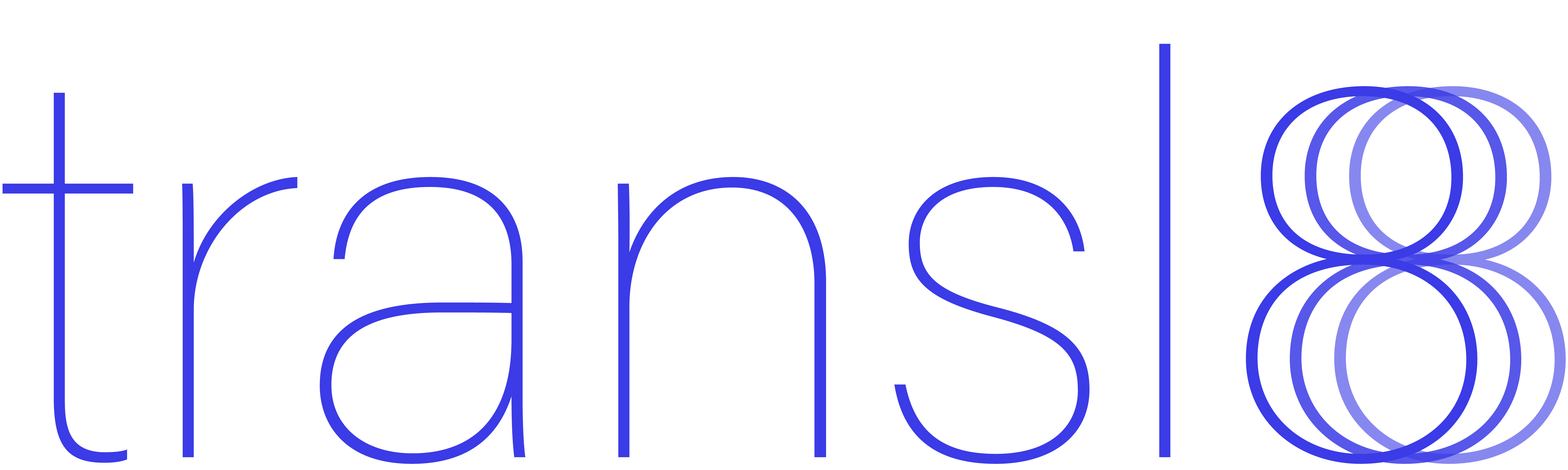
<style>
.page{position:relative;width:1568px;height:470px;background:#ffffff}
.page>*{position:absolute;margin:0}
.t1{font:945px "AcuminConcept-Thin";color:#3b3be7}
.t2{font:945px "AcuminConcept-Thin";color:#5757ea}
.t3{font:945px "AcuminConcept-Thin";color:#8787f0}
</style>
<div class="page">
<p class="t1" style="left:2px;top:44px;width:1476px;height:420px">transl8</p>
<p class="t2" style="left:1290px;top:86px;width:231px;height:378px">8</p>
<p class="t3" style="left:1334px;top:86px;width:232px;height:378px">8</p>
</div>
